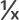
<style>
.page{position:relative;width:19px;height:20px;background:#ffffff}
.page>*{position:absolute;margin:0}
.t1{font:30px "Calibri";color:#3c3c3c}
</style>
<div class="page">
<p class="t1" style="left:0px;top:0px;width:17px;height:20px">⅟</p>
<p class="t1" style="left:10px;top:11px;width:9px;height:9px">ₓ</p>
</div>
